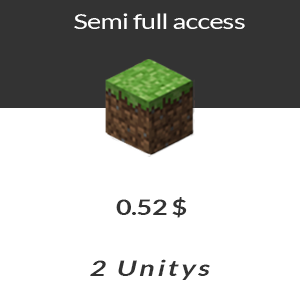
<style>
.page{position:relative;width:300px;height:304px;background:#ffffff}
.page>*{position:absolute;margin:0}
.t1{font:21.3px "Lato-Regular";letter-spacing:-0.025em;color:#ffffff;scale:1.26 1}
.t2{font:21.6px "Lato-Bold";letter-spacing:-0.025em;color:#333333;scale:1.26 1}
.t3{font:21.6px "Lato-Bold";letter-spacing:0.1em;color:#333333;font-style:italic;scale:1.26 1}
</style>
<div class="page">
<p class="t1" style="left:74px;top:13px;width:171px;height:16px">Semi full access</p>
<p class="t2" style="left:116px;top:197px;width:71px;height:21px">0.52 $</p>
<p class="t3" style="left:90px;top:259px;width:120px;height:21px">2 Unitys</p>
</div>
